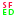
<style>
.page{position:relative;width:16px;height:16px;background:#ffffff}
.page>*{position:absolute;margin:0}
.t1{font:8px "MyriadPro-Regular";color:#f50e3a}
.t2{font:8px "MyriadPro-Regular";color:#02fc06}
</style>
<div class="page">
<p class="t1" style="left:3px;top:2px;width:10px;height:6px">S F</p>
<p class="t2" style="left:3px;top:9px;width:11px;height:6px">E D</p>
</div>
